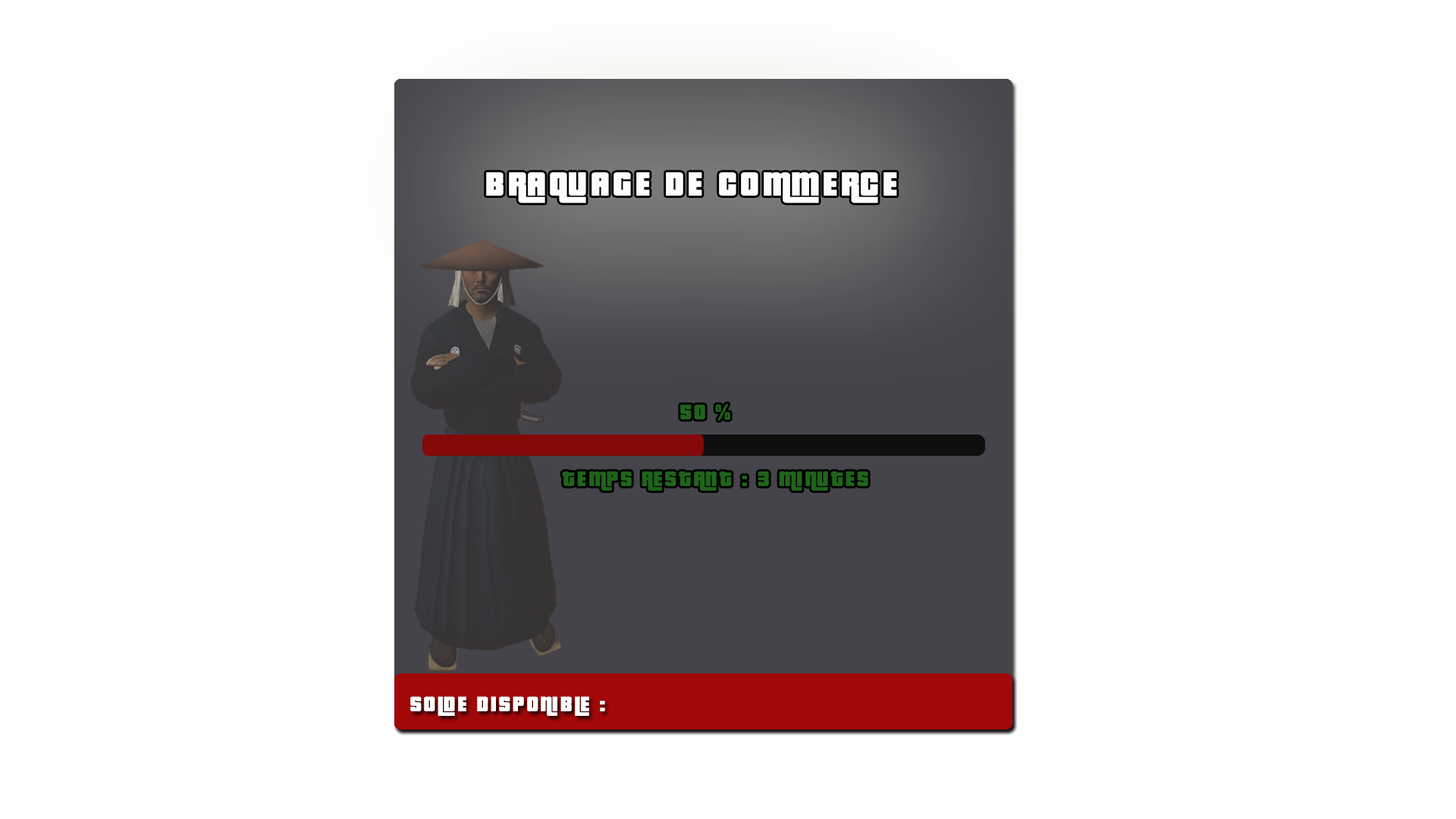
<style>
.page{position:relative;width:1456px;height:819px;background:#ffffff}
.page>*{position:absolute;margin:0}
.t1{font:36.4px "PricedownBl-Regular";letter-spacing:0.1em;color:#fffcfc}
.t2{font:22.7px "PricedownBl-Regular";letter-spacing:0.1em;color:#20631b}
.t3{font:22.7px "PricedownBl-Regular";letter-spacing:0.1em;color:#ffffff}
</style>
<div class="page">
<p class="t1" style="left:486px;top:172px;width:411px;height:31px">BRAQUAGE DE COMMERCE</p>
<p class="t2" style="left:680px;top:403px;width:50px;height:18px">50 %</p>
<p class="t2" style="left:562px;top:471px;width:306px;height:20px">TEMPS RESTANT : 3 MINUTES</p>
<p class="t3" style="left:410px;top:696px;width:195px;height:20px">SOLDE DISPONIBLE :</p>
</div>
